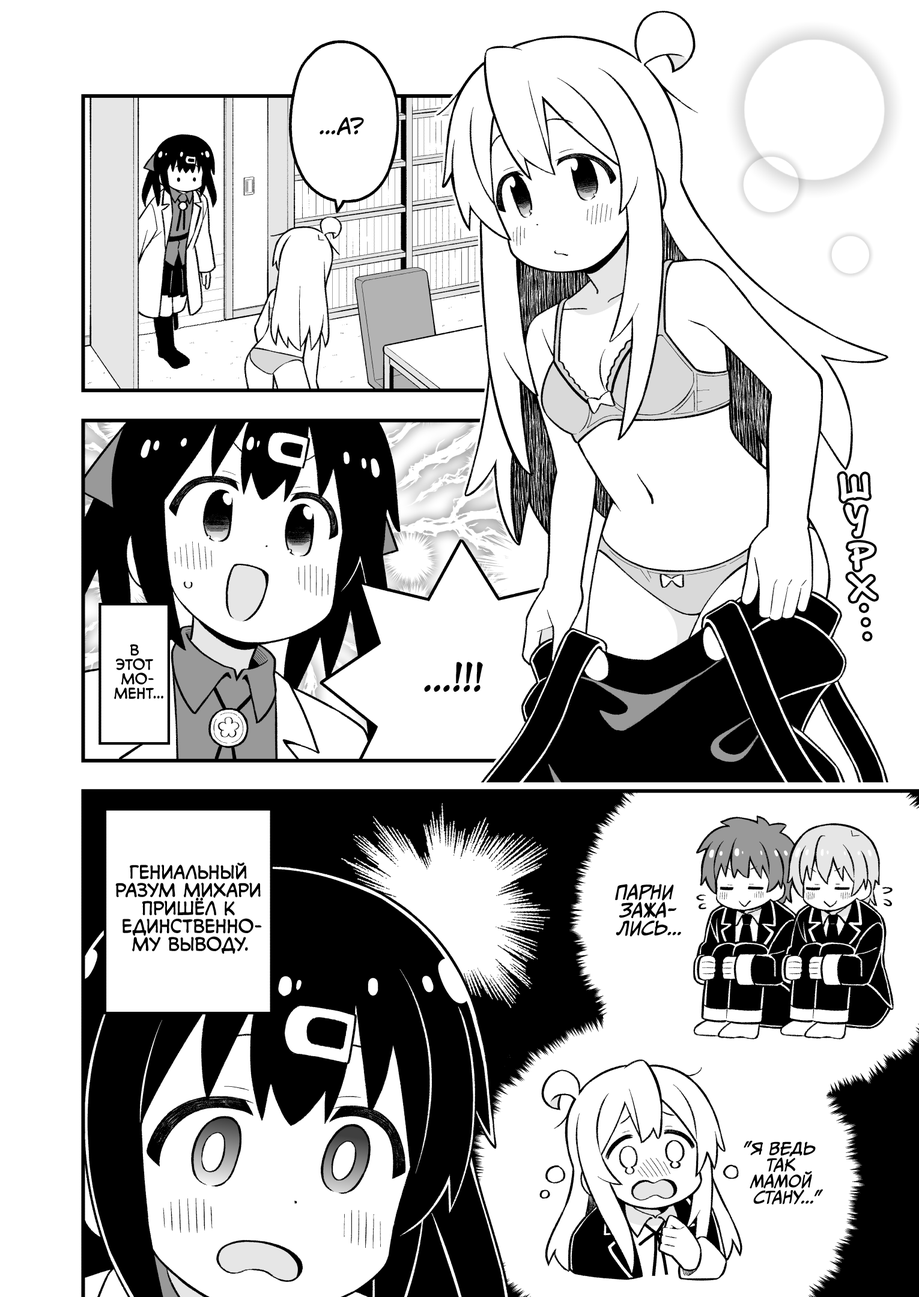
<style>
.page{position:relative;width:919px;height:1297px;background:#ffffff}
.page>*{position:absolute;margin:0}
.t1{font:21.6px "KuraiVoice2";color:#000000;text-transform:uppercase}
.t2{font:36px "DSNote";color:#ffffff;font-weight:bold}
.t3{font:14.4px "v_CCMonologous";color:#000000;text-transform:uppercase}
.t4{font:36px "KuraiVoice2";color:#000000;text-transform:uppercase}
.t5{font:18px "v_CCMonologous";color:#000000;text-transform:uppercase}
.t6{font:18px "CCMeanwhile";color:#000000;text-transform:uppercase;font-style:italic}
.t7{font:16.2px "CCMeanwhile";color:#000000;text-transform:uppercase;font-style:italic}
</style>
<div class="page">
<p class="t1" style="left:320px;top:117px;width:44px;height:18px">...А?</p>
<p class="t2" style="left:840px;top:475px;width:29px;height:25px;rotate:-4deg">ш</p>
<p class="t2" style="left:846px;top:506px;width:20px;height:30px;rotate:-3deg">у</p>
<p class="t2" style="left:849px;top:544px;width:24px;height:25px;rotate:-3deg">р</p>
<p class="t2" style="left:849px;top:575px;width:27px;height:26px;rotate:-4deg">х</p>
<p class="t3" style="left:114px;top:645px;width:49px;height:55px;text-align:center">В<br>этот<br>мо-<br>мент...</p>
<p class="t4" style="left:424px;top:662px;width:59px;height:30px">...!!!</p>
<p class="t5" style="left:115px;top:863px;width:147px;height:91px;text-align:center">гениальный<br>разум Михари<br>пришёл к<br>единственно-<br>му выводу.</p>
<p class="t6" style="left:615px;top:884px;width:66px;height:53px;text-align:center">Парни<br>зажа-<br>лись...</p>
<p class="t7" style="left:744px;top:1141px;width:79px;height:64px;text-align:center">"Я ведь<br>так<br>мамой<br>стану..."</p>
</div>
